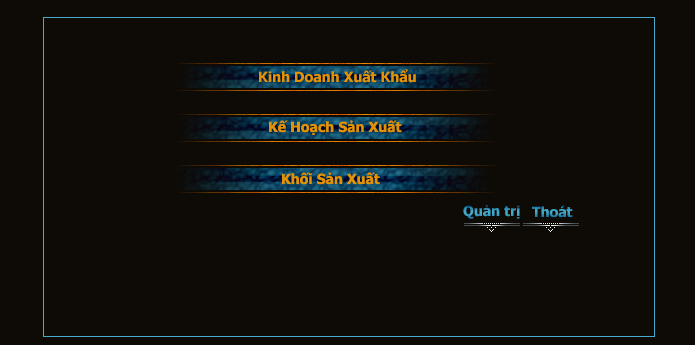
<style>
.page{position:relative;width:695px;height:345px;background:#0e0b06}
.page>*{position:absolute;margin:0}
.t1{font:14px "Tahoma-Bold";color:#e39206}
.t2{font:14px "Tahoma-Bold";color:#3da0c2}
.t3{font:14px "Tahoma-Bold"}
</style>
<div class="page">
<p class="t1" style="left:259px;top:69px;width:157px;height:14px">Kinh Doanh Xuất Khẩu</p>
<p class="t1" style="left:269px;top:120px;width:133px;height:15px">Kế Hoạch Sản Xuất</p>
<p class="t1" style="left:282px;top:172px;width:98px;height:13px">Khối Sản Xuất</p>
<p class="t2" style="left:463px;top:204px;width:57px;height:15px">Quản trị</p>
<p class="t3" style="left:532px;top:205px;width:41px;height:13px">Thoát</p>
</div>
